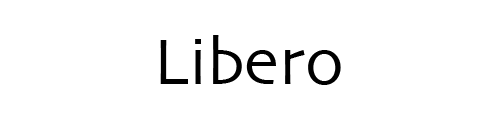
<style>
.page{position:relative;width:500px;height:120px;background:#ffffff}
.page>*{position:absolute;margin:0}
.t1{font:67.5px "Skia-Regular";color:#000000}
</style>
<div class="page">
<p class="t1" style="left:160px;top:35px;width:181px;height:50px">Libero</p>
</div>
